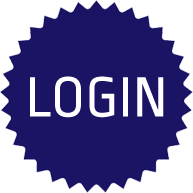
<style>
.page{position:relative;width:193px;height:193px;background:#1b1464}
.page>*{position:absolute;margin:0}
.t1{font:60px "RopaSansSCPro-Regular";color:#ffffff}
</style>
<div class="page">
<p class="t1" style="left:30px;top:76px;width:134px;height:42px">LOGIN</p>
</div>
